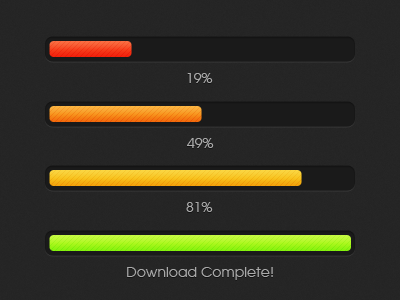
<style>
.page{position:relative;width:400px;height:300px;background:#252525}
.page>*{position:absolute;margin:0}
.t1{font:14px "AvantGarde-Book";color:#aaaaaa}
</style>
<div class="page">
<p class="t1" style="left:187px;top:73px;width:26px;height:10px">19%</p>
<p class="t1" style="left:187px;top:138px;width:27px;height:10px">49%</p>
<p class="t1" style="left:186px;top:202px;width:27px;height:10px">81%</p>
<p class="t1" style="left:127px;top:267px;width:146px;height:13px">Download Complete!</p>
</div>
